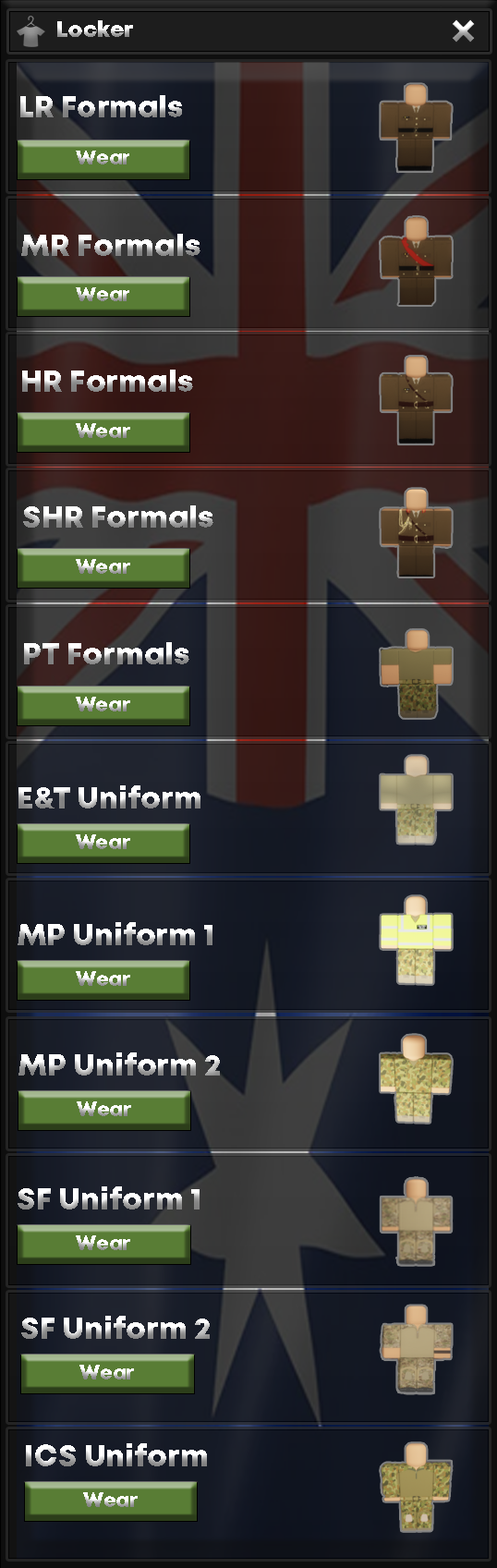
<style>
.page{position:relative;width:497px;height:1568px}
.page>*{position:absolute;margin:0}
.t1{font:22.1px "Mont-HeavyDEMO"}
.t2{font:30px "Mont-HeavyDEMO"}
.t3{font:19.7px "Mont-HeavyDEMO"}
.t4{font:20.5px "Mont-HeavyDEMO";scale:0.97 1}
.t5{font:20.5px "Mont-HeavyDEMO"}
</style>
<div class="page">
<p class="t1" style="left:57px;top:20px;width:76px;height:17px">Locker</p>
<p class="t2" style="left:20px;top:95px;width:162px;height:22px">LR Formals</p>
<p class="t3" style="left:76px;top:151px;width:53px;height:13px">Wear</p>
<p class="t2" style="left:21px;top:234px;width:180px;height:22px">MR Formals</p>
<p class="t3" style="left:76px;top:287px;width:53px;height:14px">Wear</p>
<p class="t2" style="left:22px;top:370px;width:171px;height:22px">HR Formals</p>
<p class="t4" style="left:76px;top:423px;width:54px;height:15px">Wear</p>
<p class="t2" style="left:23px;top:505px;width:190px;height:23px">SHR Formals</p>
<p class="t4" style="left:76px;top:559px;width:54px;height:15px">Wear</p>
<p class="t2" style="left:24px;top:642px;width:165px;height:22px">PT Formals</p>
<p class="t4" style="left:76px;top:697px;width:54px;height:14px">Wear</p>
<p class="t2" style="left:18px;top:785px;width:183px;height:23px">E&amp;T Uniform</p>
<p class="t4" style="left:76px;top:834px;width:54px;height:15px">Wear</p>
<p class="t2" style="left:18px;top:922px;width:195px;height:23px">MP Uniform 1</p>
<p class="t5" style="left:76px;top:971px;width:54px;height:15px">Wear</p>
<p class="t2" style="left:18px;top:1052px;width:202px;height:24px">MP Uniform 2</p>
<p class="t5" style="left:77px;top:1101px;width:54px;height:15px">Wear</p>
<p class="t2" style="left:18px;top:1186px;width:182px;height:23px">SF Uniform 1</p>
<p class="t5" style="left:76px;top:1235px;width:54px;height:15px">Wear</p>
<p class="t2" style="left:21px;top:1316px;width:189px;height:23px">SF Uniform 2</p>
<p class="t5" style="left:79px;top:1365px;width:55px;height:15px">Wear</p>
<p class="t2" style="left:26px;top:1443px;width:181px;height:23px">ICS Uniform</p>
<p class="t5" style="left:83px;top:1492px;width:55px;height:15px">Wear</p>
</div>
